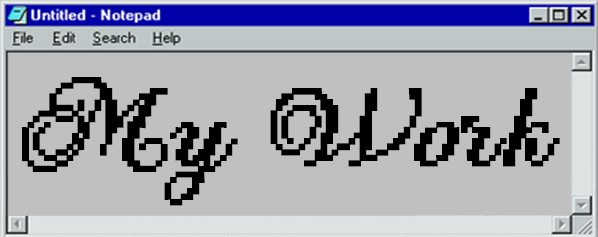
<style>
.page{position:relative;width:598px;height:237px;background:#c0c0c0}
.page>*{position:absolute;margin:0}
.t1{font:91.1px "PFPixelscript-Regular";letter-spacing:-0.04em;color:#000000;font-weight:bold}
</style>
<div class="page">
<p class="t1" style="left:22px;top:77px;width:538px;height:129px">My Work</p>
</div>
